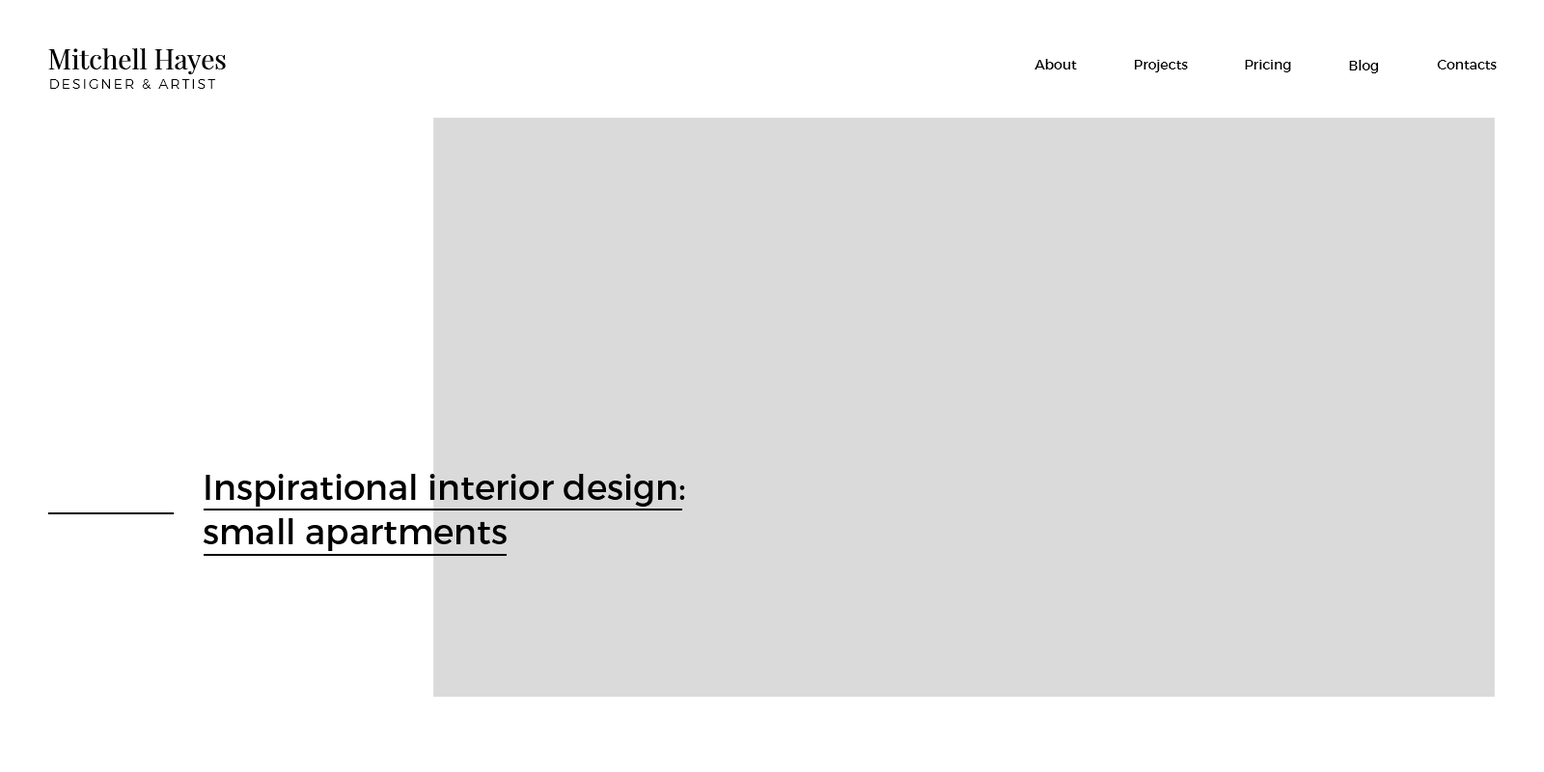
<style>
.page{position:relative;width:1544px;height:772px;background:#dadada}
.page>*{position:absolute;margin:0}
.t1{font:27px "PlayfairDisplay-Regular";color:#000000}
.t2{font:13.5px "Montserrat-Regular";color:#000000}
.t3{font:13.5px "Montserrat-Light";letter-spacing:0.15em;color:#000000}
.t4{font:34.7px/44.4px "Montserrat-Regular";color:#000000}
</style>
<div class="page">
<p class="t1" style="left:48px;top:48px;width:178px;height:26px">Mitchell Hayes</p>
<p class="t2" style="left:1035px;top:59px;width:42px;height:10px">About</p>
<p class="t2" style="left:1135px;top:60px;width:53px;height:12px">Projects</p>
<p class="t2" style="left:1245px;top:60px;width:46px;height:12px">Pricing</p>
<p class="t2" style="left:1349px;top:60px;width:29px;height:13px">Blog</p>
<p class="t2" style="left:1437px;top:60px;width:60px;height:9px">Contacts</p>
<p class="t3" style="left:50px;top:79px;width:165px;height:10px">DESIGNER &amp; ARTIST</p>
<p class="t4" style="left:203px;top:474px;width:482px;height:77px">Inspirational interior design:<br>small apartments</p>
</div>
